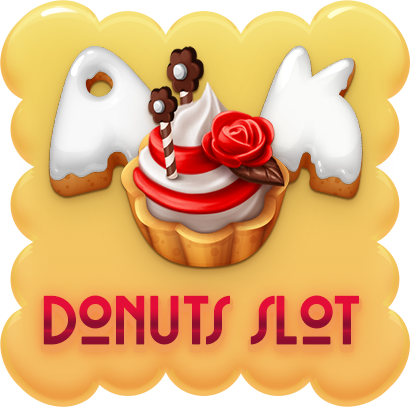
<style>
.page{position:relative;width:410px;height:407px}
.page>*{position:absolute;margin:0}
.t1{font:68.2px "RousseauDeco";letter-spacing:-0.025em}
</style>
<div class="page">
<p class="t1" style="left:43px;top:295px;width:316px;height:50px">Donuts slot</p>
</div>
